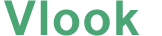
<style>
.page{position:relative;width:162px;height:36px;background:#ffffff}
.page>*{position:absolute;margin:0}
.t1{font:48px "Arial-BoldMT";letter-spacing:0.025em;color:#4ba575}
</style>
<div class="page">
<p class="t1" style="left:4px;top:0px;width:135px;height:36px">Vlook</p>
</div>
